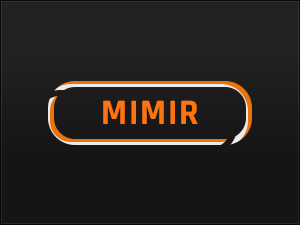
<style>
.page{position:relative;width:300px;height:225px;background:#151515}
.page>*{position:absolute;margin:0}
.t1{font:36px "Rajdhani-Bold";letter-spacing:0.05em;color:#ff740e;text-transform:uppercase}
</style>
<div class="page">
<p class="t1" style="left:103px;top:100px;width:95px;height:24px">MiMir</p>
</div>
